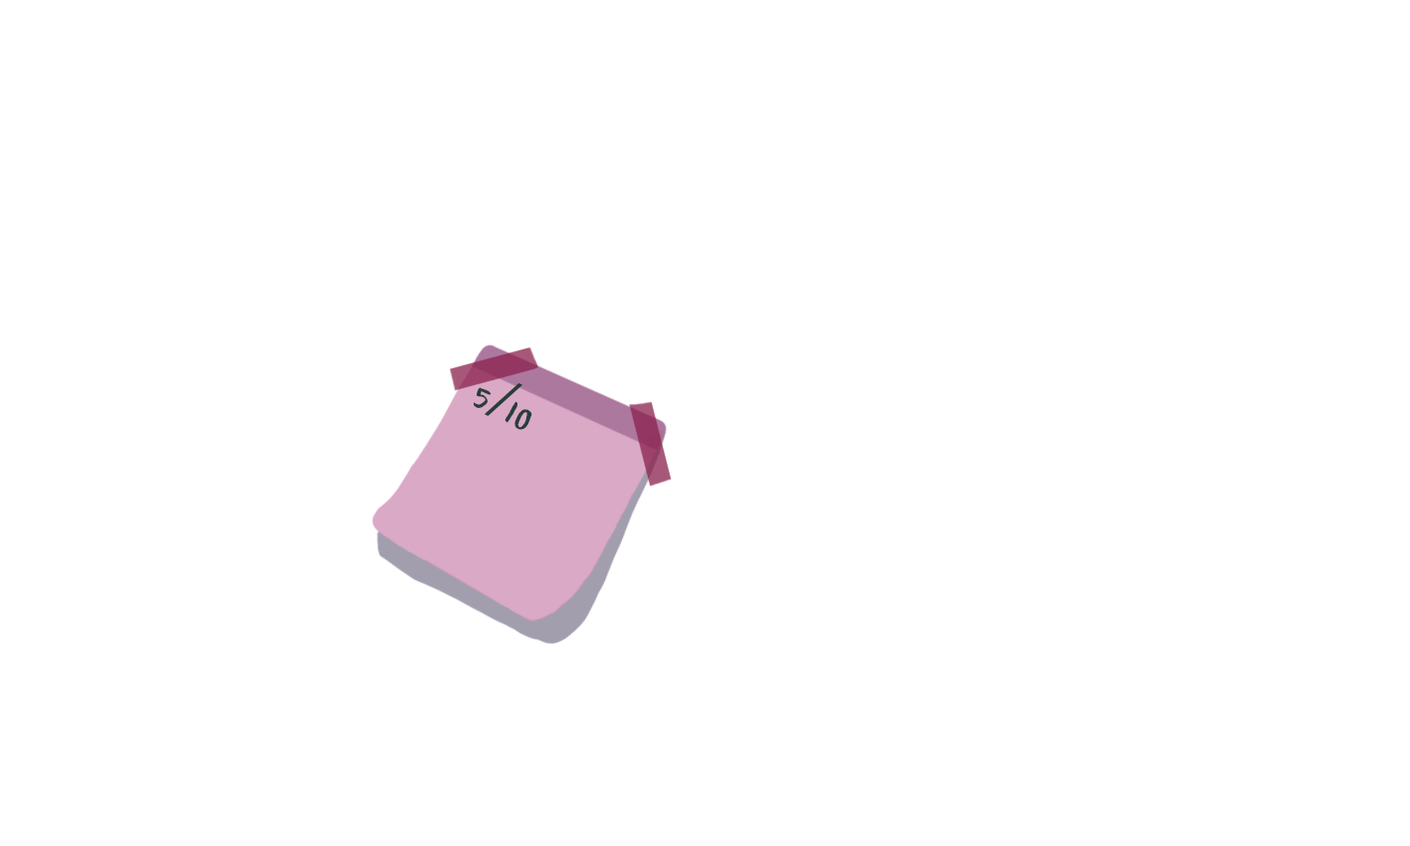
<style>
.page{position:relative;width:1410px;height:846px;background:#ffffff}
.page>*{position:absolute;margin:0}
.t1{font:59.7px "BabyFox";color:#283e3b;text-transform:uppercase}
.t2{font:59.7px "MyriadPro-Regular";color:#283e3b;text-transform:uppercase}
</style>
<div class="page">
<p class="t1" style="left:474px;top:383px;width:58px;height:47px;rotate:27deg">5<span class="t2">/</span>10</p>
</div>
